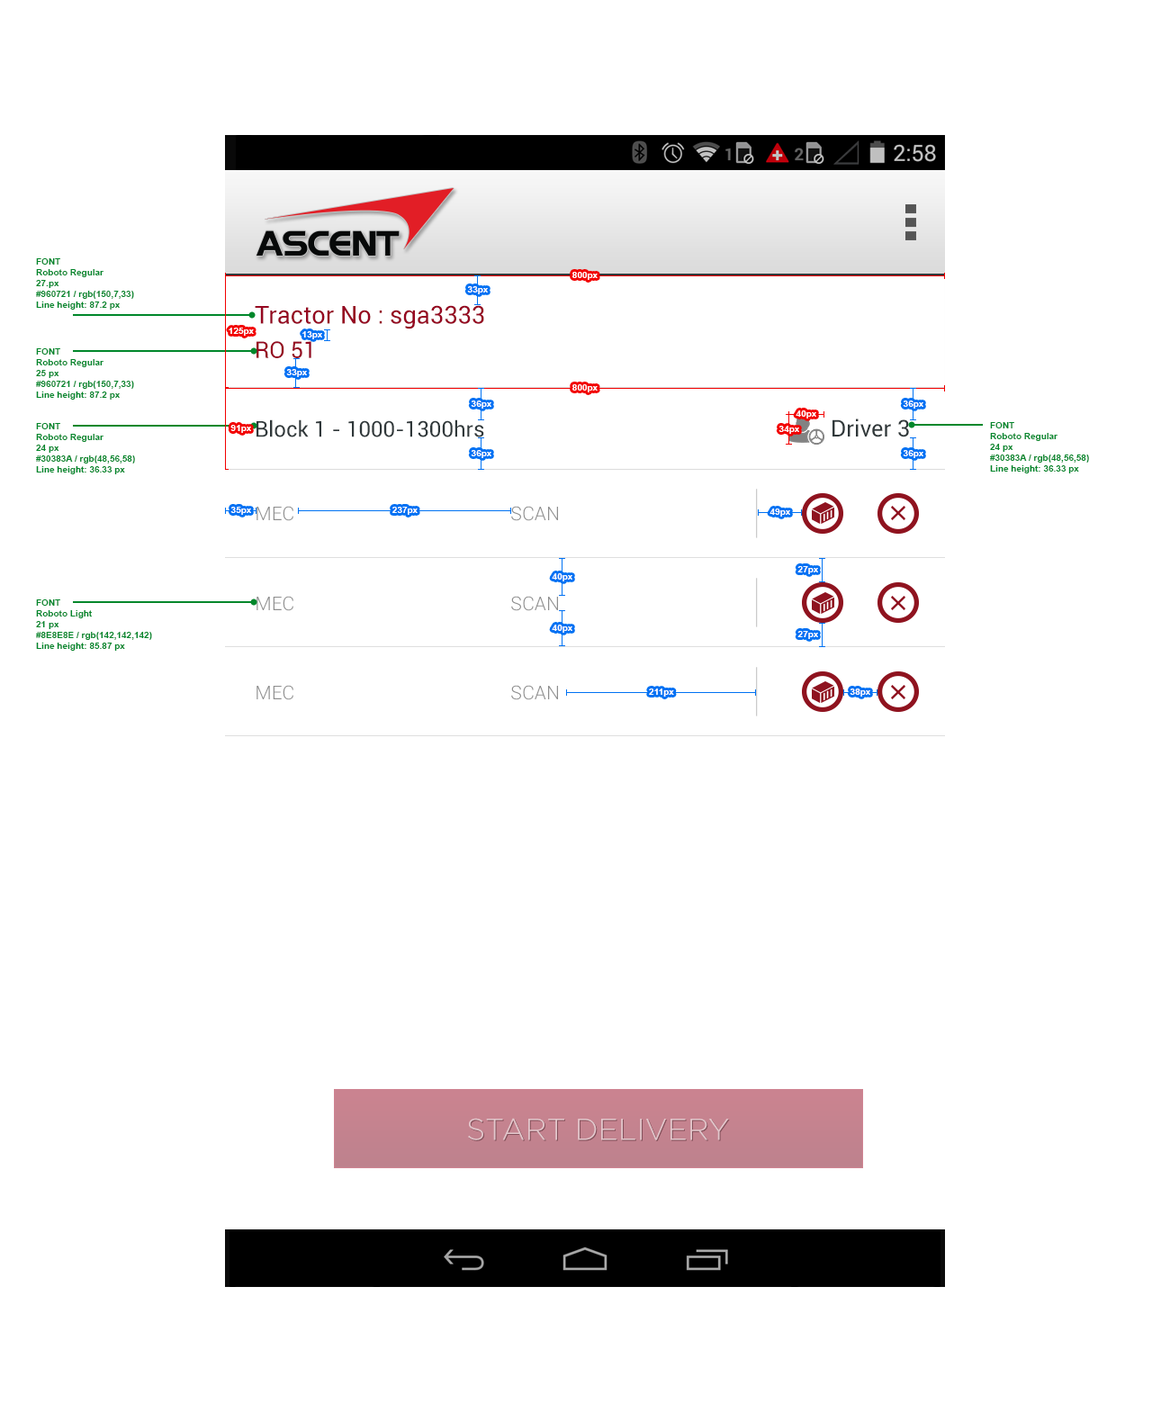
<style>
.page{position:relative;width:1170px;height:1422px;background:#ffffff}
.page>*{position:absolute;margin:0}
.t1{font:9px "Arial-BoldMT";color:#00872b}
.t2{font:9px "Arial-BoldMT";color:#ffffff}
.t3{font:24.5px "Roboto-Regular";color:#960721}
.t4{font:22.9px "Roboto-Regular";color:#960721}
.t5{font:21.6px "Roboto-Regular";color:#30383a}
.t6{font:22.9px "Roboto-Regular";color:#30383a}
.t7{font:19px "Roboto-Light";color:#8e8e8e}
.t8{font:30.1px "Gotham-Light";color:#e3c7cc}
</style>
<div class="page">
<p class="t1" style="left:36px;top:258px;width:98px;height:52px">FONT <br>Roboto Regular<br>27.px<br>#960721 / rgb(150,7,33)<br>Line height: 87.2 px</p>
<p class="t2" style="left:572px;top:272px;width:26px;height:8px">800px</p>
<p class="t2" style="left:467px;top:286px;width:21px;height:8px">33px</p>
<p class="t3" style="left:255px;top:305px;width:229px;height:24px">Tractor No : sga3333</p>
<p class="t2" style="left:229px;top:328px;width:25px;height:8px">125px</p>
<p class="t4" style="left:256px;top:341px;width:55px;height:17px">RO 51</p>
<p class="t2" style="left:302px;top:331px;width:20px;height:8px">13px</p>
<p class="t1" style="left:36px;top:348px;width:98px;height:52px">FONT <br>Roboto Regular<br>25 px<br>#960721 / rgb(150,7,33)<br>Line height: 87.2 px</p>
<p class="t2" style="left:286px;top:369px;width:21px;height:8px">33px</p>
<p class="t2" style="left:572px;top:384px;width:26px;height:8px">800px</p>
<p class="t2" style="left:471px;top:400px;width:20px;height:9px">36px</p>
<p class="t2" style="left:903px;top:400px;width:20px;height:9px">36px</p>
<p class="t2" style="left:796px;top:410px;width:20px;height:8px">40px</p>
<p class="t1" style="left:36px;top:423px;width:99px;height:51px">FONT <br>Roboto Regular<br>24 px<br>#30383A / rgb(48,56,58)<br>Line height: 36.33 px</p>
<p class="t2" style="left:230px;top:425px;width:21px;height:8px">91px</p>
<p class="t5" style="left:256px;top:419px;width:228px;height:18px">Block 1 - 1000-1300hrs</p>
<p class="t2" style="left:778px;top:426px;width:21px;height:8px">34px</p>
<p class="t6" style="left:832px;top:418px;width:77px;height:19px">Driver 3</p>
<p class="t1" style="left:990px;top:422px;width:99px;height:51px">FONT <br>Roboto Regular<br>24 px<br>#30383A / rgb(48,56,58)<br>Line height: 36.33 px</p>
<p class="t2" style="left:471px;top:450px;width:20px;height:8px">36px</p>
<p class="t2" style="left:903px;top:450px;width:20px;height:8px">36px</p>
<p class="t2" style="left:230px;top:507px;width:21px;height:8px">35px</p>
<p class="t7" style="left:256px;top:506px;width:37px;height:15px">MEC</p>
<p class="t2" style="left:392px;top:507px;width:26px;height:8px">237px</p>
<p class="t7" style="left:511px;top:506px;width:47px;height:15px">SCAN</p>
<p class="t2" style="left:770px;top:508px;width:20px;height:9px">49px</p>
<p class="t2" style="left:797px;top:566px;width:21px;height:8px">27px</p>
<p class="t2" style="left:552px;top:573px;width:20px;height:8px">40px</p>
<p class="t1" style="left:36px;top:599px;width:116px;height:52px">FONT <br>Roboto Light<br>21 px<br>#8E8E8E / rgb(142,142,142)<br>Line height: 85.87 px</p>
<p class="t7" style="left:256px;top:596px;width:37px;height:15px">MEC</p>
<p class="t7" style="left:511px;top:596px;width:47px;height:15px">SCAN</p>
<p class="t2" style="left:552px;top:625px;width:20px;height:8px">40px</p>
<p class="t2" style="left:797px;top:631px;width:21px;height:8px">27px</p>
<p class="t7" style="left:256px;top:685px;width:37px;height:15px">MEC</p>
<p class="t7" style="left:511px;top:685px;width:47px;height:15px">SCAN</p>
<p class="t2" style="left:649px;top:688px;width:25px;height:9px">211px</p>
<p class="t2" style="left:850px;top:688px;width:20px;height:9px">38px</p>
<p class="t8" style="left:468px;top:1118px;width:261px;height:22px">START DELIVERY</p>
</div>
